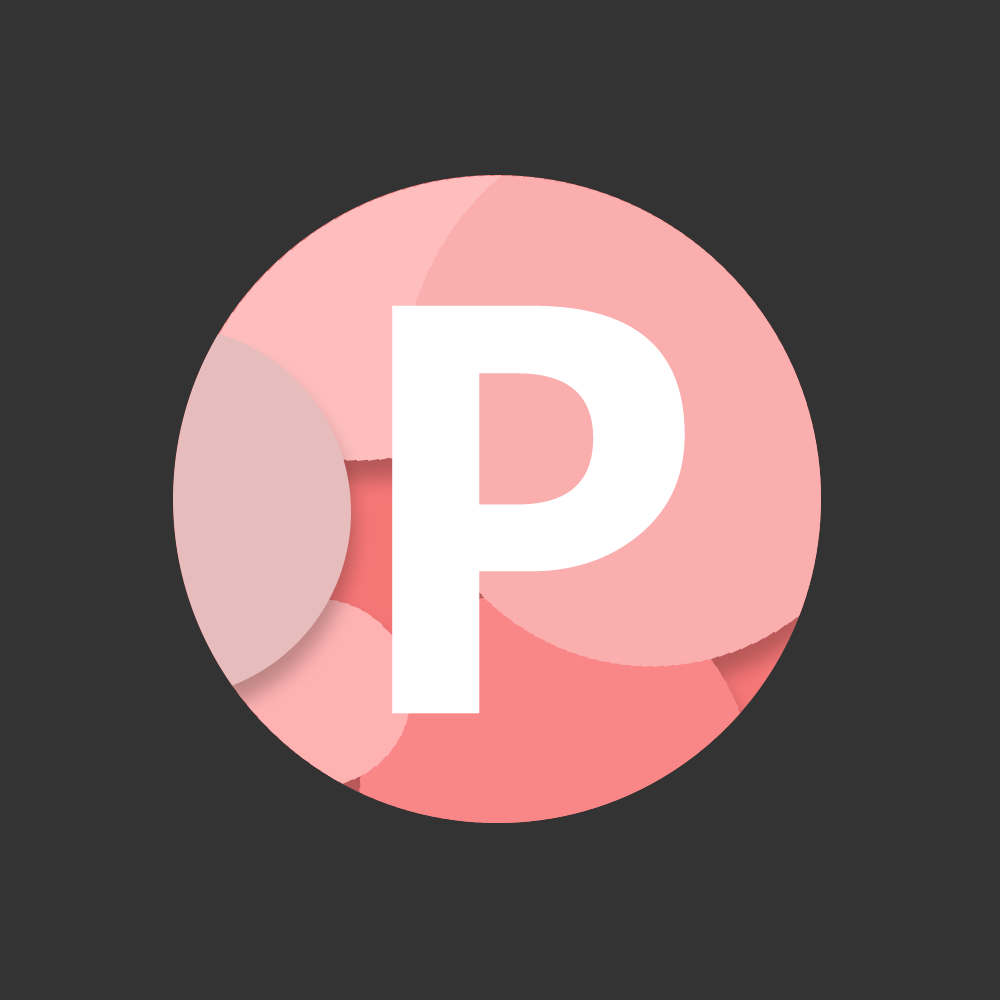
<style>
.page{position:relative;width:1000px;height:1000px;background:#333333}
.page>*{position:absolute;margin:0}
.t1{font:129.2px "MicrosoftYaHei-Bold";color:#ffffff}
</style>
<div class="page">
<p class="t1" style="left:392px;top:305px;width:293px;height:409px">P</p>
</div>
